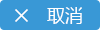
<style>
.page{position:relative;width:100px;height:30px;background:#3998d6}
.page>*{position:absolute;margin:0}
.t1{font:20px "AdobeHeitiStd-Regular";color:#ffffff}
.t2{font:18px "MicrosoftYaHei";color:#ffffff}
</style>
<div class="page">
<p class="t1" style="left:15px;top:9px;width:13px;height:13px">×</p>
<p class="t2" style="left:47px;top:7px;width:35px;height:17px">取消</p>
</div>
